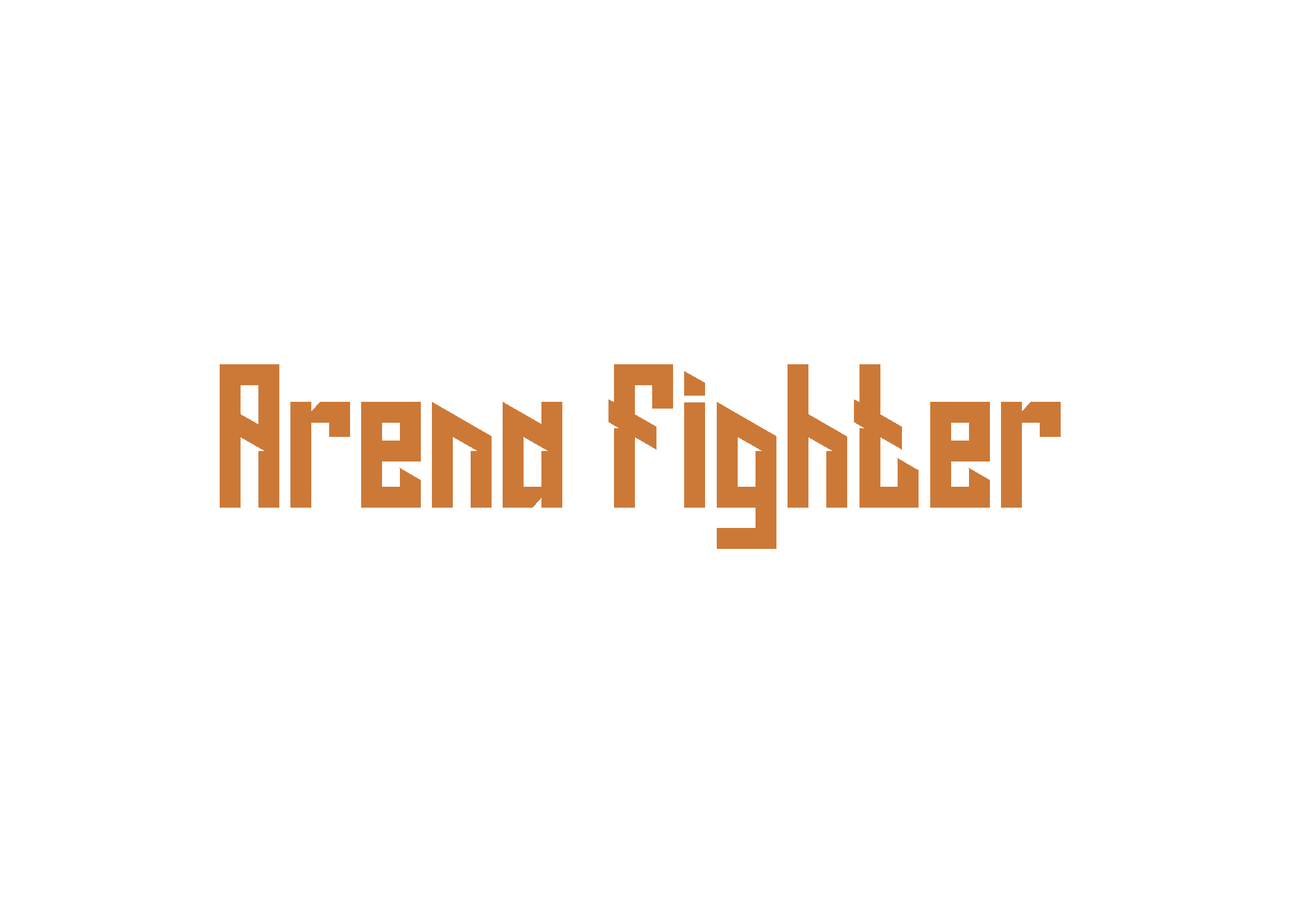
<style>
.page{position:relative;width:1292px;height:923px;background:#ffffff}
.page>*{position:absolute;margin:0}
.t1{font:184.6px "LongShot";color:#cc7937}
</style>
<div class="page">
<p class="t1" style="left:220px;top:364px;width:841px;height:185px">Arena Fighter</p>
</div>
